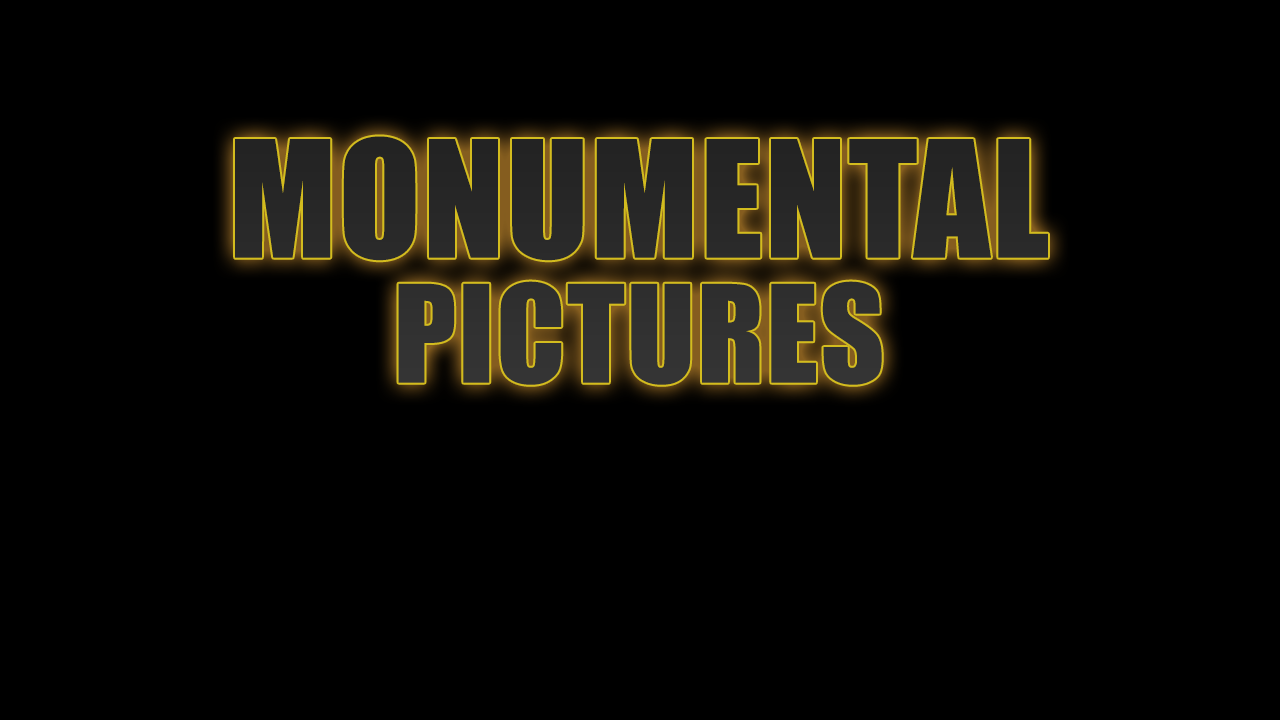
<style>
.page{position:relative;width:1280px;height:720px;background:#000000}
.page>*{position:absolute;margin:0}
.t1{font:150px/83.3px "Impact";letter-spacing:0.015em;color:#292929}
.t2{font:125px/83.3px "Impact";letter-spacing:0.015em;color:#292929}
</style>
<div class="page">
<p class="t1" style="left:235px;top:136px;width:813px;height:249px;text-align:center">MONUMENTAL<br><span class="t2">PICTURES</span></p>
</div>
